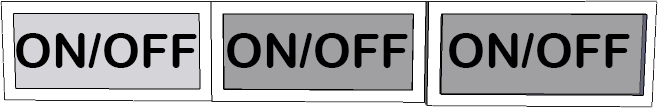
<style>
.page{position:relative;width:658px;height:108px;background:#ffffff}
.page>*{position:absolute;margin:0}
.t1{font:48px "ArialRoundedMTBold";color:#000000}
</style>
<div class="page">
<p class="t1" style="left:16px;top:33px;width:181px;height:35px">ON/OFF</p>
<p class="t1" style="left:227px;top:33px;width:181px;height:35px">ON/OFF</p>
<p class="t1" style="left:449px;top:33px;width:181px;height:35px">ON/OFF</p>
</div>
